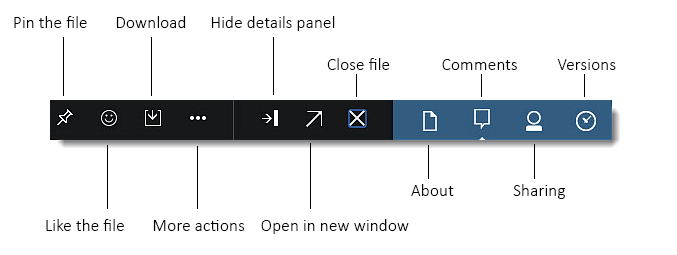
<style>
.page{position:relative;width:677px;height:255px;background:#ffffff}
.page>*{position:absolute;margin:0}
.t1{font:30px "Calibri-Light";color:#000000}
</style>
<div class="page">
<p class="t1" style="left:14px;top:16px;width:321px;height:15px">Pin the file       Download      Hide details panel</p>
<p class="t1" style="left:327px;top:58px;width:289px;height:12px">Close file             Comments          Versions</p>
<p class="t1" style="left:411px;top:184px;width:154px;height:15px">About               Sharing</p>
<p class="t1" style="left:46px;top:219px;width:363px;height:15px">Like the file       More actions    Open in new window</p>
</div>
